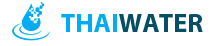
<style>
.page{position:relative;width:211px;height:46px;background:#ffffff}
.page>*{position:absolute;margin:0}
.t1{font:26.4px "MyriadPro-Bold";color:#044f65}
.t2{font:26.4px "MyriadPro-Bold";color:#03acf2}
</style>
<div class="page">
<p class="t1" style="left:61px;top:14px;width:142px;height:18px"><span class="t2">THAI</span>WATER</p>
</div>
